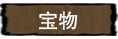
<style>
.page{position:relative;width:118px;height:39px}
.page>*{position:absolute;margin:0}
.t1{font:20.7px "FZHTJW--GB1-0";letter-spacing:-0.025em;color:#ffffff}
</style>
<div class="page">
<p class="t1" style="left:39px;top:11px;width:39px;height:19px">宝物</p>
</div>
